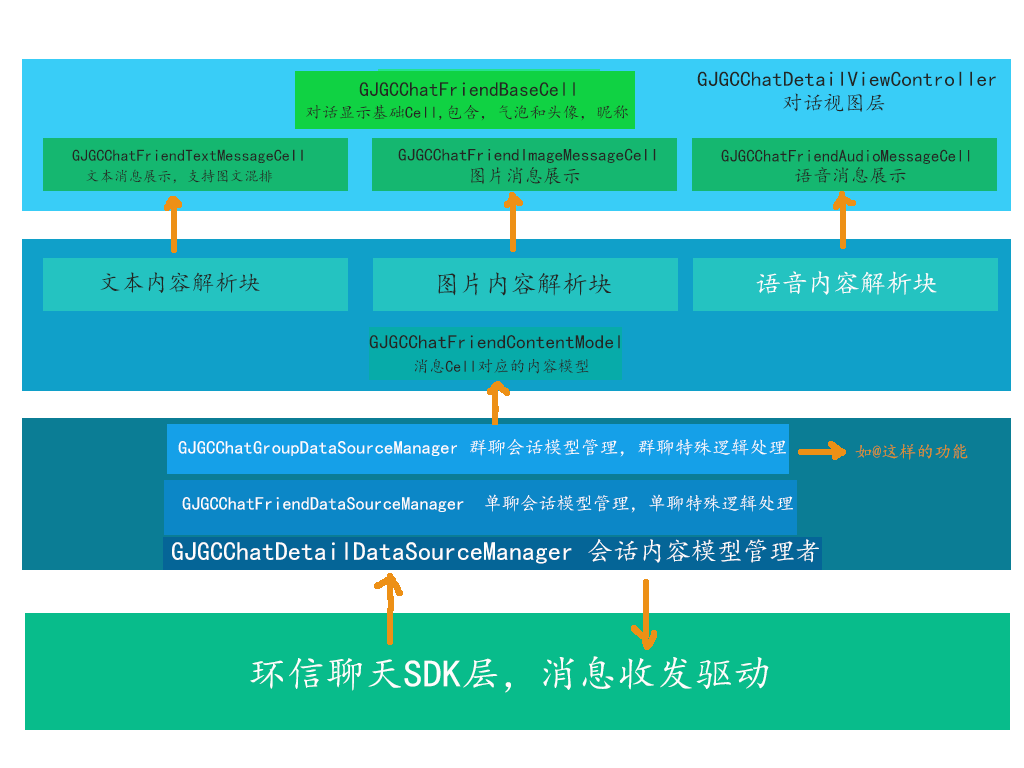
<style>
.page{position:relative;width:1024px;height:768px;background:#ffffff}
.page>*{position:absolute;margin:0}
.t1{font:21.1px "KaiTi";color:#232724}
.t2{font:20.1px "KaiTi";color:#232724}
.t3{font:16.3px "KaiTi";color:#232724}
.t4{font:17.3px "KaiTi";color:#232724}
.t5{font:14.4px "KaiTi";color:#232724}
.t6{font:19.2px "KaiTi";color:#232724}
.t7{font:18.2px "KaiTi";color:#232724;scale:1.03 1}
.t8{font:23px "KaiTi";color:#232724}
.t9{font:25.6px "KaiTi";color:#232724}
.t10{font:25.9px "KaiTi";color:#fdfdfd}
.t11{font:18.2px "KaiTi";color:#fdfdfd}
.t12{font:17.3px "KaiTi";color:#ed9016}
.t13{font:38.4px "KaiTi";color:#fdfdfd}
</style>
<div class="page">
<p class="t1" style="left:697px;top:71px;width:299px;height:15px">GJGCChatDetailViewController</p>
<p class="t2" style="left:359px;top:82px;width:216px;height:14px">GJGCChatFriendBaseCell</p>
<p class="t1" style="left:783px;top:93px;width:102px;height:19px">对话视图层</p>
<p class="t3" style="left:306px;top:104px;width:322px;height:17px">对话显示基础Cell,包含，气泡和头像，昵称</p>
<p class="t3" style="left:72px;top:149px;width:231px;height:14px">GJGCChatFriendTextMessageCell</p>
<p class="t4" style="left:398px;top:148px;width:258px;height:15px">GJGCChatFriendImageMessageCell</p>
<p class="t4" style="left:721px;top:149px;width:249px;height:15px">GJGCChatFriendAudioMessageCell</p>
<p class="t5" style="left:86px;top:169px;width:187px;height:15px">文本消息展示，支持图文混排</p>
<p class="t6" style="left:471px;top:167px;width:109px;height:18px">图片消息展示</p>
<p class="t7" style="left:795px;top:167px;width:111px;height:17px">语音消息展示</p>
<p class="t8" style="left:100px;top:272px;width:160px;height:21px">文本内容解析块</p>
<p class="t9" style="left:438px;top:272px;width:174px;height:24px">图片内容解析块</p>
<p class="t10" style="left:756px;top:271px;width:181px;height:24px">语音内容解析块</p>
<p class="t6" style="left:369px;top:335px;width:251px;height:14px">GJGCChatFriendContentModel</p>
<p class="t3" style="left:414px;top:359px;width:175px;height:15px">消息Cell对应的内容模型</p>
<p class="t11" style="left:178px;top:439px;width:608px;height:18px">GJGCChatGroupDataSourceManager 群聊会话模型管理，群聊特殊逻辑处理</p>
<p class="t12" style="left:855px;top:444px;width:113px;height:16px">如@这样的功能</p>
<p class="t11" style="left:182px;top:494px;width:611px;height:19px">GJGCChatFriendDataSourceManager  单聊会话模型管理，单聊特殊逻辑处理</p>
<p class="t10" style="left:172px;top:539px;width:647px;height:25px">GJGCChatDetailDataSourceManager 会话内容模型管理者</p>
<p class="t13" style="left:250px;top:656px;width:519px;height:37px">环信聊天SDK层，消息收发驱动</p>
</div>
